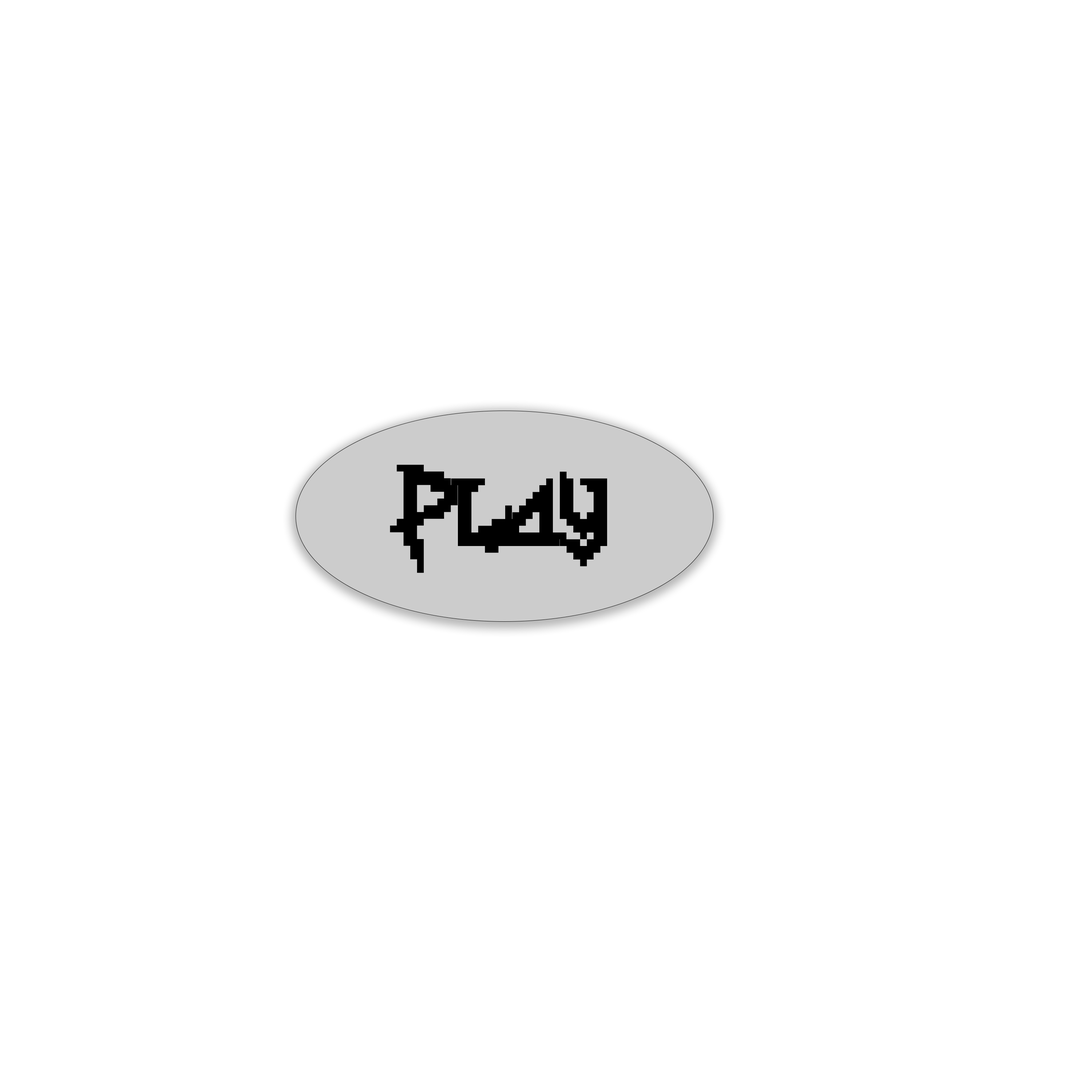
<style>
.page{position:relative;width:1092px;height:1092px;background:#ffffff}
.page>*{position:absolute;margin:0}
.t1{font:74.3px "Lady-Radical-2";letter-spacing:0.005em;color:#000000}
</style>
<div class="page">
<p class="t1" style="left:390px;top:464px;width:217px;height:109px">Play</p>
</div>
